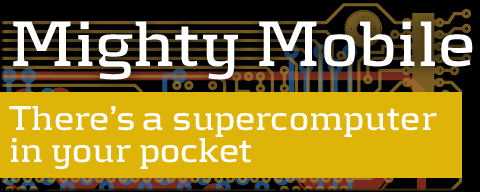
<style>
.page{position:relative;width:480px;height:192px;background:#deb408}
.page>*{position:absolute;margin:0}
.t1{font:36px/32px "Kontrapunkt-Bold";color:#ffffff}
.t2{font:67px "Kontrapunkt-Bold";color:#ffffff}
</style>
<div class="page">
<p class="t1" style="left:9px;top:21px;width:464px;height:148px"><span class="t2">Mighty Mobile<br></span><br>There’s a supercomputer <br>in your pocket</p>
<p class="t1" style="left:9px;top:21px;width:464px;height:148px"><span class="t2">Mighty Mobile<br></span><br>There’s a supercomputer <br>in your pocket</p>
</div>
